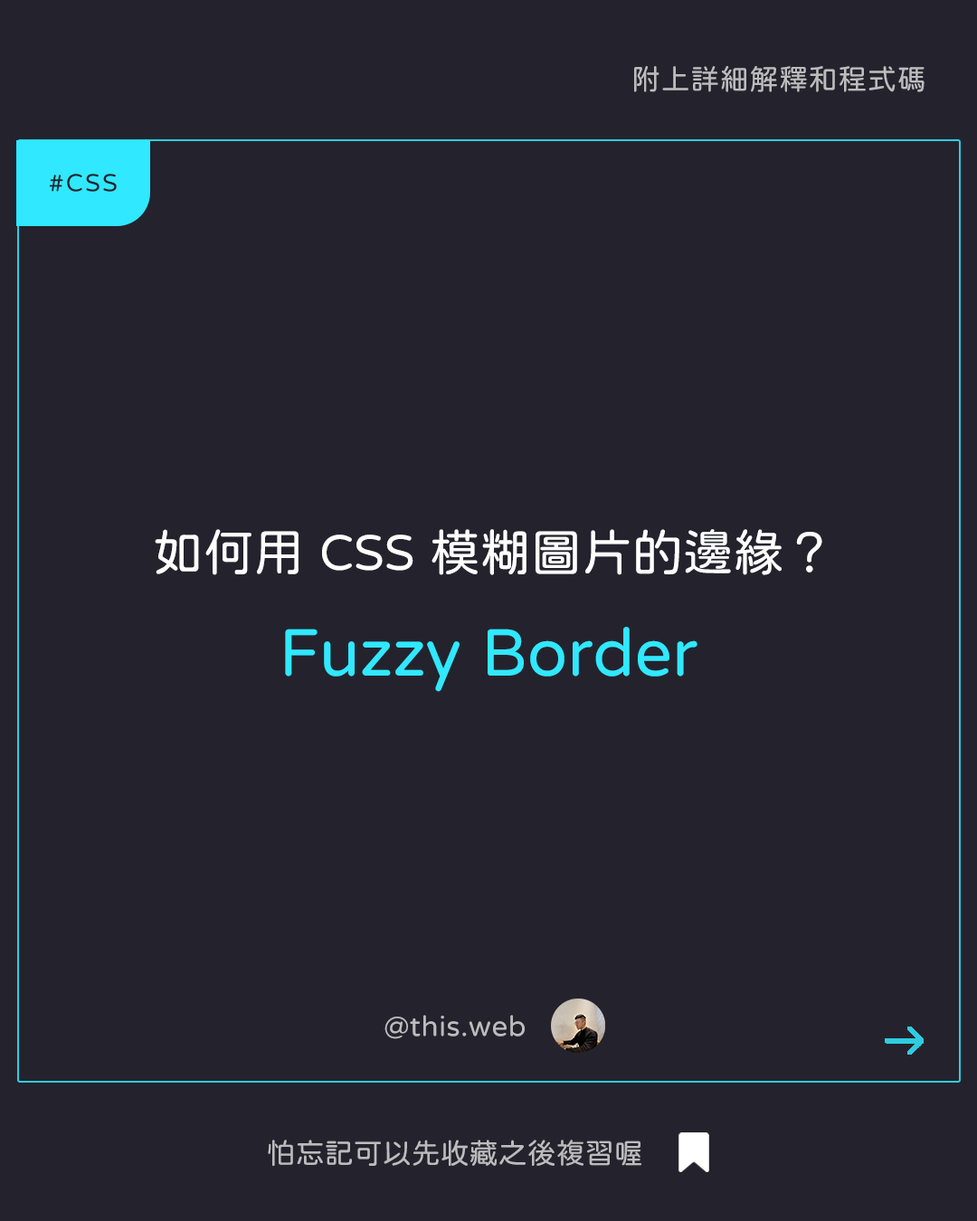
<style>
.page{position:relative;width:977px;height:1221px;background:#24232d}
.page>*{position:absolute;margin:0}
.t1{font:28.9px "jf-openhuninn-1.1";letter-spacing:0.02em;color:#bcbcbd}
.t2{font:25.3px "jf-openhuninn-1.1";letter-spacing:0.08em;color:#24232d}
.t3{font:50.6px "jf-openhuninn-1.1";color:#fefefe}
.t4{font:67.8px "jf-openhuninn-1.1";color:#30e8ff}
.t5{font:28.9px "jf-openhuninn-1.1";color:#bcbcbd}
</style>
<div class="page">
<p class="t1" style="left:634px;top:66px;width:290px;height:26px">附上詳細解釋和程式碼</p>
<p class="t2" style="left:49px;top:174px;width:68px;height:18px">#CSS</p>
<p class="t3" style="left:155px;top:529px;width:667px;height:46px">如何用 CSS 模糊圖片的邊緣？</p>
<p class="t4" style="left:285px;top:627px;width:412px;height:65px">Fuzzy Border</p>
<p class="t1" style="left:384px;top:1015px;width:141px;height:24px">@this.web</p>
<p class="t5" style="left:268px;top:1139px;width:373px;height:27px">怕忘記可以先收藏之後複習喔</p>
</div>
